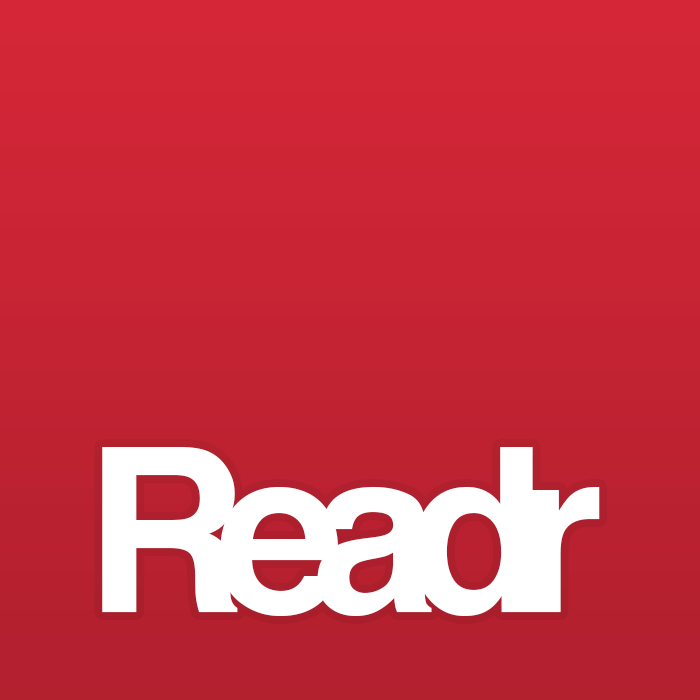
<style>
.page{position:relative;width:700px;height:700px}
.page>*{position:absolute;margin:0}
.t1{font:228.6px "Helvetica-Bold";letter-spacing:-0.14em;color:#ffffff}
</style>
<div class="page">
<p class="t1" style="left:102px;top:447px;width:498px;height:169px">Readr</p>
</div>
